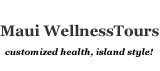
<style>
.page{position:relative;width:160px;height:71px;background:#ffffff}
.page>*{position:absolute;margin:0}
.t1{font:15px "Georgia-Bold";color:#333333}
.t2{font:9px "Georgia-BoldItalic";color:#010000}
</style>
<div class="page">
<p class="t1" style="left:0px;top:24px;width:159px;height:13px">Maui WellnessTours</p>
<p class="t2" style="left:5px;top:48px;width:148px;height:9px">customized health, island style!</p>
</div>
